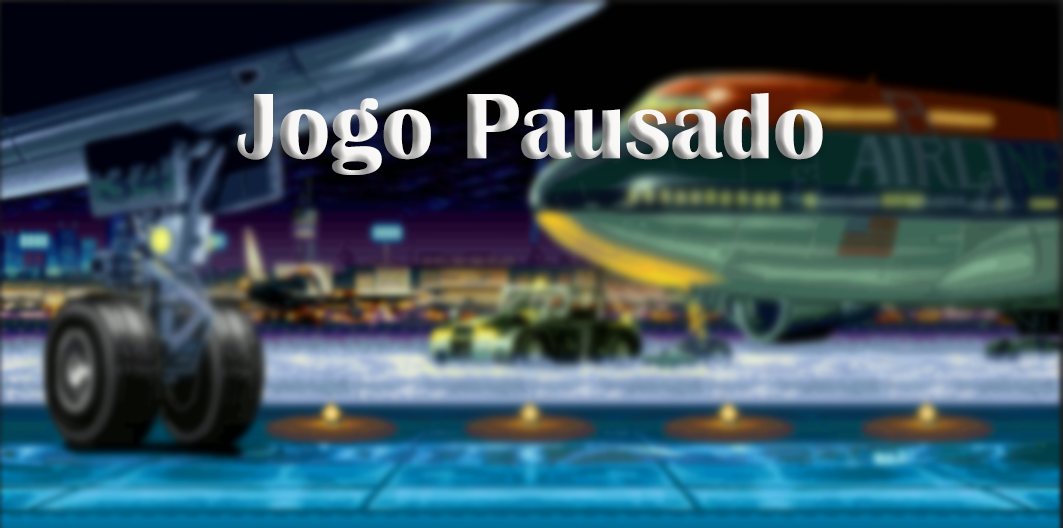
<style>
.page{position:relative;width:1063px;height:528px}
.page>*{position:absolute;margin:0}
.t1{font:96px "BritannicBold"}
</style>
<div class="page">
<p class="t1" style="left:237px;top:93px;width:586px;height:82px">Jogo Pausado</p>
</div>
